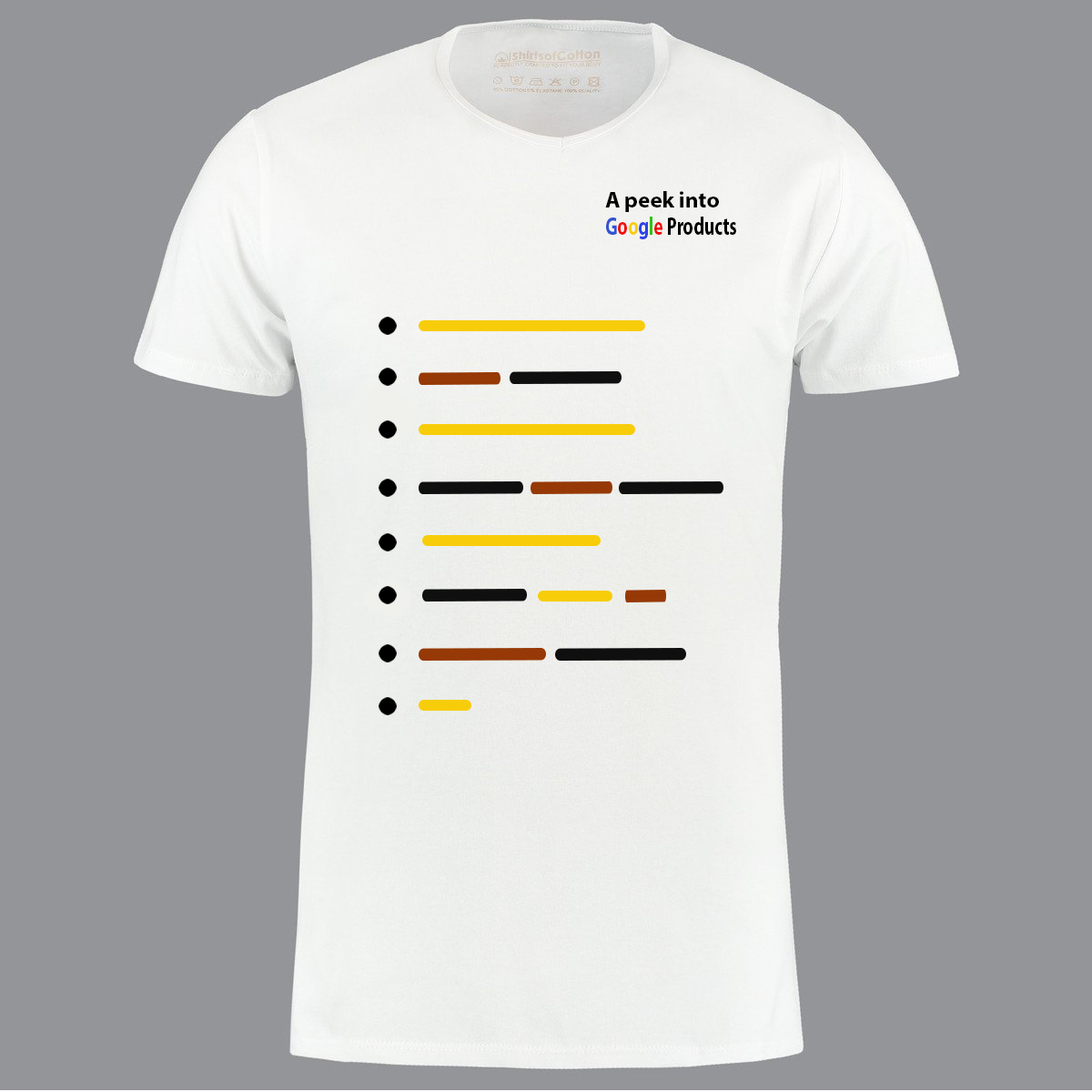
<style>
.page{position:relative;width:1092px;height:1092px;background:#949599}
.page>*{position:absolute;margin:0}
.t1{font:22.7px "MyriadPro-Bold";color:#000000}
.t2{font:24.7px "MyriadPro-Bold";color:#000000;scale:0.72 1}
.t3{font:24.7px "MyriadPro-Bold";color:#3153d0;scale:0.72 1}
.t4{font:24.7px "MyriadPro-Bold";color:#f21010;scale:0.72 1}
.t5{font:24.7px "MyriadPro-Bold";color:#f7cd0a;scale:0.72 1}
.t6{font:24.7px "MyriadPro-Bold";color:#2e43e5;scale:0.72 1}
.t7{font:24.7px "MyriadPro-Bold";color:#32c11a;scale:0.72 1}
.t8{font:24.7px "MyriadPro-Bold";color:#ef0e0e;scale:0.72 1}
</style>
<div class="page">
<p class="t1" style="left:605px;top:191px;width:114px;height:21px">A peek into</p>
<p class="t2" style="left:606px;top:217px;width:130px;height:22px"><span class="t3">G</span><span class="t4">o</span><span class="t5">o</span><span class="t6">g</span><span class="t7">l</span><span class="t8">e</span> Products</p>
</div>
